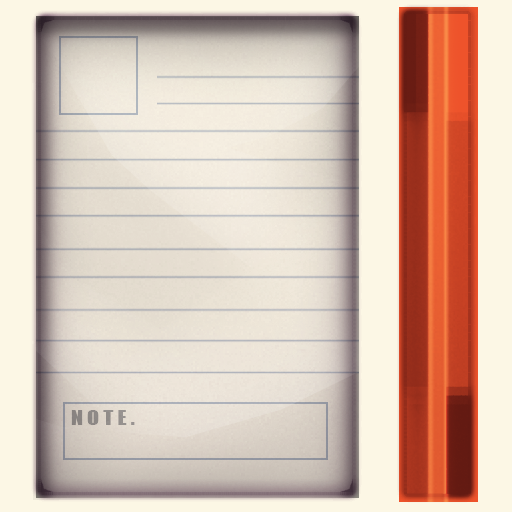
<style>
.page{position:relative;width:512px;height:512px;background:#fcf7e5}
.page>*{position:absolute;margin:0}
.t1{font:19.2px "Impact";letter-spacing:0.2em;color:#8e8986;scale:1.12 1}
</style>
<div class="page">
<p class="t1" style="left:71px;top:410px;width:64px;height:15px">NOTE.</p>
</div>
